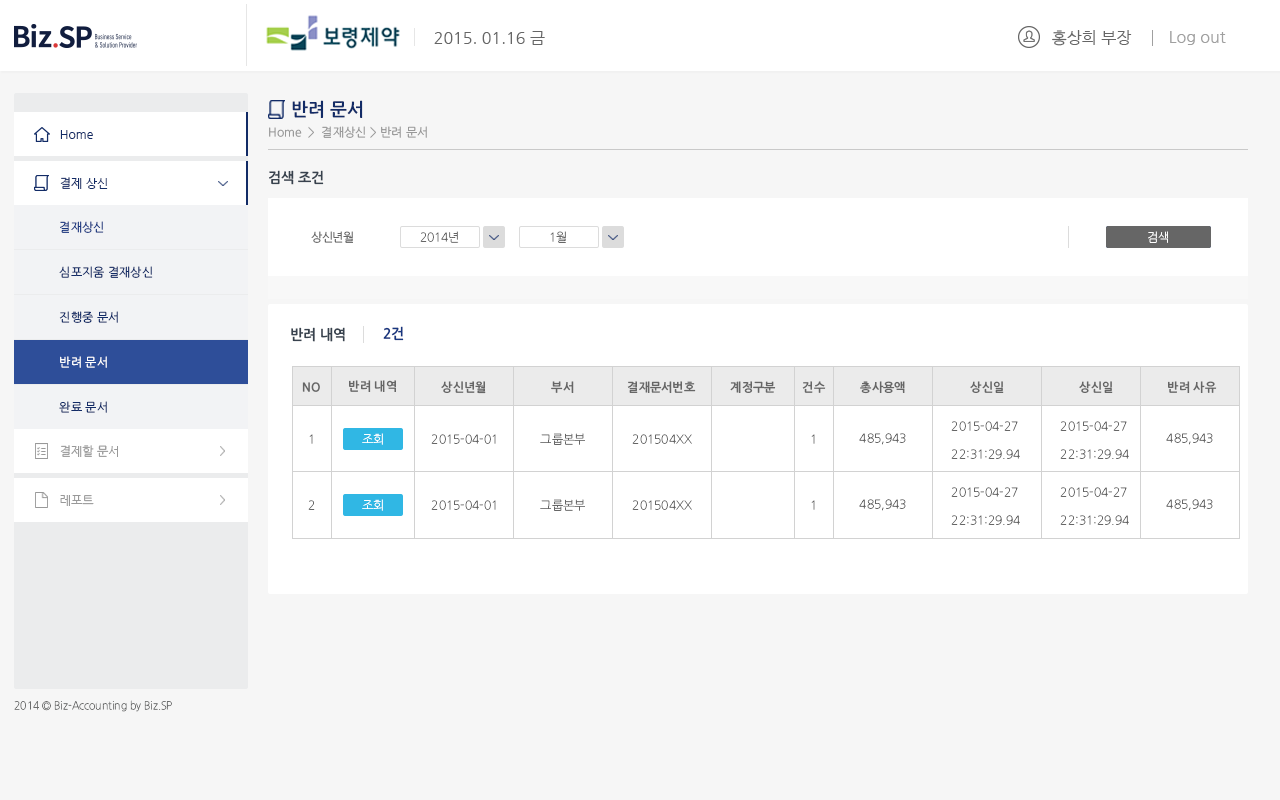
<style>
.page{position:relative;width:1280px;height:800px;background:#ffffff}
.page>*{position:absolute;margin:0}
.t1{font:16px "NanumGothic";color:#666666}
.t2{font:16px "NanumGothic";color:#a0a0a0}
.t3{font:18px "NanumGothicOTFBold";color:#122b66}
.t4{font:12px "NanumGothicOTF";color:#999999}
.t5{font:12px "NanumGothic";color:#122b66}
.t6{font:14px "NanumGothicOTFBold";color:#38424e}
.t7{font:12px "NanumGothicOTF";color:#173680}
.t8{font:12px "NanumGothicOTF";letter-spacing:-0.025em;color:#666666}
.t9{font:12px "NanumGothicOTFLight";letter-spacing:-0.025em;color:#666666}
.t10{font:12px "NanumGothicOTFLight";letter-spacing:-0.025em;color:#ffffff}
.t11{font:12px "NanumGothicOTF";color:#122b66}
.t12{font:14px "NanumGothicOTFBold";color:#173680}
.t13{font:12px "NanumGothicOTF";color:#ffffff}
.t14{font:12px "NanumGothicOTFBold";color:#666666}
.t15{font:12px/28.1px "NanumGothicOTFLight";color:#666666}
.t16{font:12px "NanumGothicOTFLight";color:#666666}
.t17{font:12px "NanumGothic";color:#999999}
.t18{font:11px "NanumGothicOTFLight";color:#6c6d6d;scale:0.94 1}
</style>
<div class="page">
<p class="t1" style="left:1052px;top:30px;width:80px;height:16px">홍상희 부장</p>
<p class="t1" style="left:434px;top:31px;width:111px;height:14px">2015. 01.16 금</p>
<p class="t2" style="left:1170px;top:31px;width:56px;height:14px">Log out</p>
<p class="t3" style="left:292px;top:100px;width:71px;height:18px">반려 문서</p>
<p class="t4" style="left:269px;top:126px;width:158px;height:12px">Home  &gt;  결재상신 &gt; 반려 문서</p>
<p class="t5" style="left:60px;top:130px;width:33px;height:9px">Home</p>
<p class="t5" style="left:60px;top:130px;width:33px;height:9px">Home</p>
<p class="t6" style="left:269px;top:170px;width:55px;height:15px">검색 조건</p>
<p class="t5" style="left:60px;top:177px;width:48px;height:12px">결제 상신</p>
<p class="t7" style="left:60px;top:221px;width:44px;height:12px">결재상신</p>
<p class="t8" style="left:311px;top:231px;width:42px;height:12px">상신년월</p>
<p class="t9" style="left:420px;top:231px;width:39px;height:12px">2014년</p>
<p class="t9" style="left:550px;top:231px;width:16px;height:12px">1월</p>
<p class="t10" style="left:1148px;top:231px;width:20px;height:12px">검색</p>
<p class="t10" style="left:1148px;top:231px;width:20px;height:12px">검색</p>
<p class="t11" style="left:59px;top:266px;width:94px;height:12px">심포지움 결재상신</p>
<p class="t11" style="left:59px;top:311px;width:59px;height:12px">진행중 문서</p>
<p class="t6" style="left:291px;top:327px;width:54px;height:15px">반려 내역</p>
<p class="t12" style="left:383px;top:326px;width:21px;height:15px">2건</p>
<p class="t13" style="left:60px;top:356px;width:47px;height:12px">반려 문서</p>
<p class="t14" style="left:302px;top:382px;width:18px;height:10px">NO</p>
<p class="t14" style="left:349px;top:380px;width:47px;height:12px">반려 내역</p>
<p class="t14" style="left:441px;top:381px;width:45px;height:13px">상신년월</p>
<p class="t14" style="left:551px;top:381px;width:23px;height:12px">부서</p>
<p class="t14" style="left:627px;top:381px;width:69px;height:12px">결재문서번호</p>
<p class="t14" style="left:730px;top:381px;width:46px;height:12px">계정구분</p>
<p class="t14" style="left:802px;top:381px;width:24px;height:12px">건수</p>
<p class="t14" style="left:860px;top:381px;width:45px;height:13px">총사용액</p>
<p class="t14" style="left:970px;top:381px;width:34px;height:12px">상신일</p>
<p class="t14" style="left:1079px;top:381px;width:34px;height:12px">상신일</p>
<p class="t14" style="left:1168px;top:381px;width:49px;height:12px">반려 사유</p>
<p class="t11" style="left:59px;top:401px;width:48px;height:12px">완료 문서</p>
<p class="t15" style="left:951px;top:421px;width:69px;height:38px">2015-04-27<br>22:31:29.94</p>
<p class="t15" style="left:1060px;top:421px;width:69px;height:38px">2015-04-27<br>22:31:29.94</p>
<p class="t16" style="left:309px;top:434px;width:4px;height:10px">1</p>
<p class="t10" style="left:362px;top:433px;width:21px;height:12px">조회</p>
<p class="t16" style="left:431px;top:434px;width:65px;height:10px">2015-04-01</p>
<p class="t16" style="left:431px;top:434px;width:65px;height:10px">2015-04-01</p>
<p class="t16" style="left:540px;top:433px;width:45px;height:12px">그룹본부</p>
<p class="t16" style="left:632px;top:434px;width:60px;height:10px">201504XX</p>
<p class="t16" style="left:811px;top:434px;width:4px;height:10px">1</p>
<p class="t16" style="left:859px;top:433px;width:47px;height:12px">485,943</p>
<p class="t16" style="left:1166px;top:433px;width:47px;height:12px">485,943</p>
<p class="t17" style="left:60px;top:445px;width:58px;height:12px">결제할 문서</p>
<p class="t17" style="left:60px;top:445px;width:58px;height:12px">결제할 문서</p>
<p class="t17" style="left:60px;top:495px;width:34px;height:11px">레포트</p>
<p class="t17" style="left:60px;top:495px;width:34px;height:11px">레포트</p>
<p class="t15" style="left:951px;top:487px;width:69px;height:38px">2015-04-27<br>22:31:29.94</p>
<p class="t15" style="left:1060px;top:487px;width:69px;height:38px">2015-04-27<br>22:31:29.94</p>
<p class="t16" style="left:308px;top:500px;width:7px;height:10px">2</p>
<p class="t10" style="left:362px;top:499px;width:21px;height:12px">조회</p>
<p class="t16" style="left:431px;top:500px;width:65px;height:10px">2015-04-01</p>
<p class="t16" style="left:431px;top:500px;width:65px;height:10px">2015-04-01</p>
<p class="t16" style="left:540px;top:499px;width:45px;height:12px">그룹본부</p>
<p class="t16" style="left:632px;top:500px;width:60px;height:10px">201504XX</p>
<p class="t16" style="left:811px;top:500px;width:4px;height:10px">1</p>
<p class="t16" style="left:859px;top:499px;width:47px;height:12px">485,943</p>
<p class="t16" style="left:1166px;top:499px;width:47px;height:12px">485,943</p>
<p class="t18" style="left:14px;top:700px;width:158px;height:12px">2014 © Biz-Accounting by Biz.SP</p>
</div>
